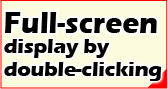
<style>
.page{position:relative;width:168px;height:89px;background:#fcfbde}
.page>*{position:absolute;margin:0}
.t1{font:20.6px/22.8px "ErasITC-Bold";color:#000000}
.t2{font:31.3px/26.8px "ErasITC-Bold";color:#000000;scale:0.91 1}
.t3{font:20.6px/24.8px "ErasITC-Bold";color:#000000}
</style>
<div class="page">
<p class="t1" style="left:4px;top:12px;width:158px;height:69px"><span class="t2">Full-screen <br></span>display by <br>double-click<span class="t3">ing</span></p>
</div>
